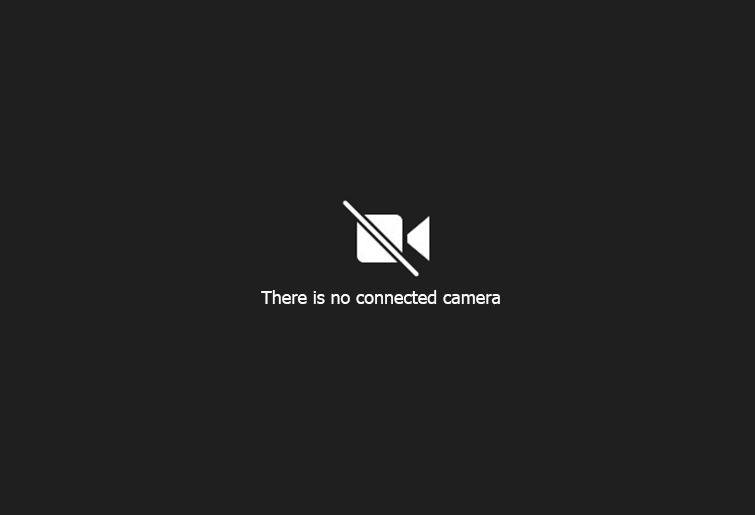
<style>
.page{position:relative;width:755px;height:515px;background:#1f1f1f}
.page>*{position:absolute;margin:0}
.t1{font:18px "Tahoma";color:#fbfbfb}
</style>
<div class="page">
<p class="t1" style="left:261px;top:290px;width:239px;height:14px">There is no connected camera</p>
</div>
